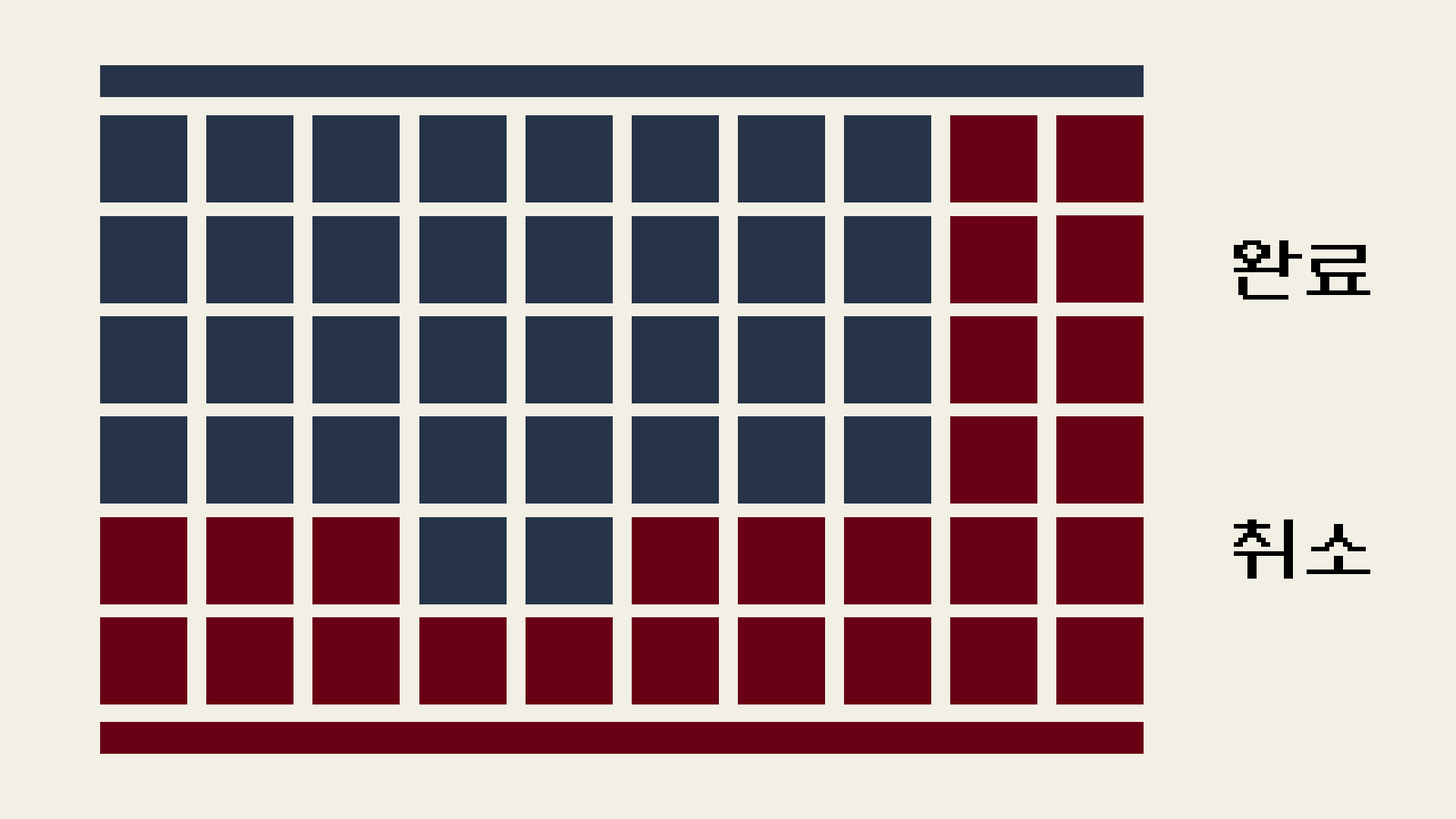
<style>
.page{position:relative;width:1456px;height:819px;background:#f2efe4}
.page>*{position:absolute;margin:0}
.t1{font:72.8px "NeoDunggeunmoCode-Regular";color:#000000}
</style>
<div class="page">
<p class="t1" style="left:1234px;top:240px;width:136px;height:60px">완료</p>
<p class="t1" style="left:1234px;top:519px;width:136px;height:60px">취소</p>
</div>
